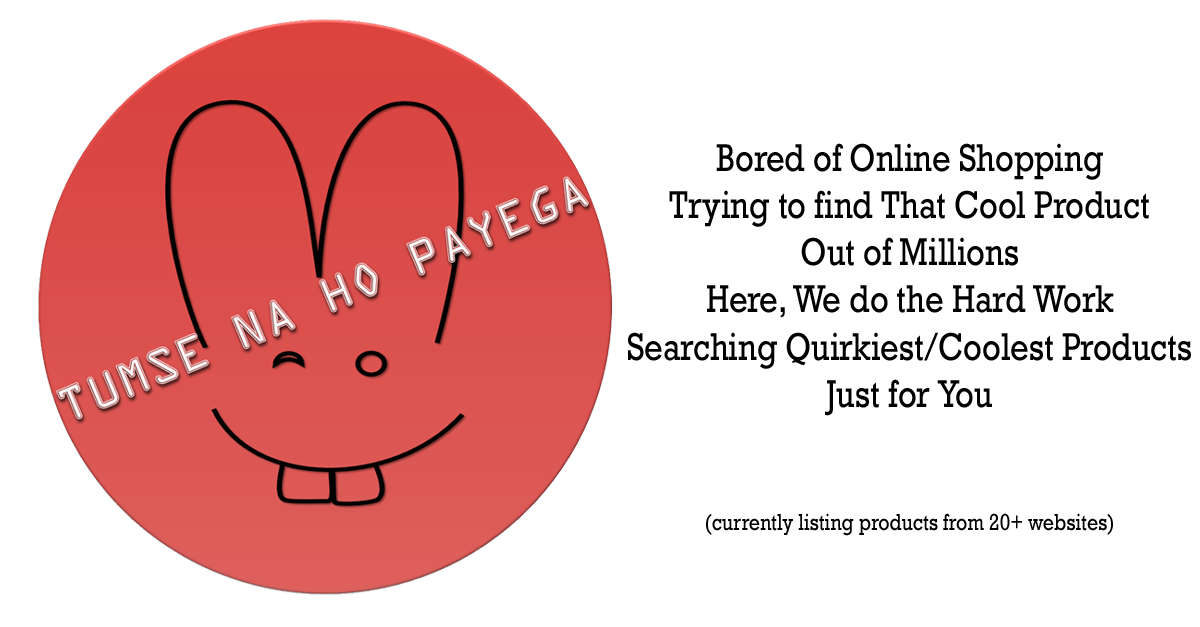
<style>
.page{position:relative;width:1200px;height:627px;background:#ffffff}
.page>*{position:absolute;margin:0}
.t1{font:39.4px "Rockwell";color:#000000;scale:0.83 1}
.t2{font:42px "Rockwell";color:#000000;scale:0.83 1}
.t3{font:23.6px "Rockwell";color:#000000;scale:0.83 1}
</style>
<div class="page">
<p class="t1" style="left:628px;top:143px;width:563px;height:393px;text-align:center"><span class="t2"><br><br></span>Bored of Online Shopping <br>Trying to find That Cool Product <br>Out of Millions<br>Here, We do the Hard Work <br>Searching Quirkiest/Coolest Products <br>Just for You<br><br><br><span class="t3">(currently listing products from 20+ websites)</span></p>
</div>
